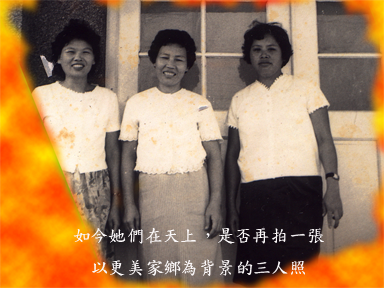
<style>
.page{position:relative;width:384px;height:288px}
.page>*{position:absolute;margin:0}
.t1{font:18px "DFKaiShu-SB-Estd-BF";color:#faf7f8}
</style>
<div class="page">
<p class="t1" style="left:73px;top:228px;width:251px;height:48px;text-align:center">如今她們在天上，是否再拍一張<br>以更美家鄉為背景的三人照</p>
</div>
